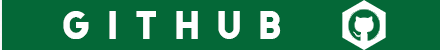
<style>
.page{position:relative;width:440px;height:50px;background:#046837}
.page>*{position:absolute;margin:0}
.t1{font:37.5px "TheNextFont";letter-spacing:0.48em;color:#ffffff}
</style>
<div class="page">
<p class="t1" style="left:63px;top:11px;width:218px;height:28px">GITHUB</p>
</div>
